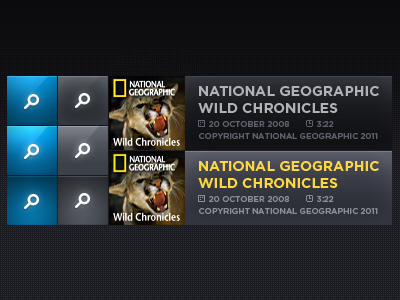
<style>
.page{position:relative;width:400px;height:300px}
.page>*{position:absolute;margin:0}
.t1{font:14px/17.2px "GothamHTF-Bold";color:#afb2b6}
.t2{font:8px "GothamHTF-Medium";color:#5e616b}
.t3{font:8px "GothamHTF-Medium";letter-spacing:-0.02em;color:#5e616b}
.t4{font:14px/17.2px "GothamHTF-Bold";color:#fcd743}
.t5{font:8px "GothamHTF-Medium";color:#8b8e95}
.t6{font:8px "GothamHTF-Medium";letter-spacing:-0.02em;color:#8b8e95}
</style>
<div class="page">
<p class="t1" style="left:198px;top:86px;width:181px;height:27px">NATIONAL GEOGRAPHIC<br>WILD CHRONICLES</p>
<p class="t2" style="left:209px;top:121px;width:80px;height:6px">20 OCTOBER 2008</p>
<p class="t3" style="left:317px;top:121px;width:17px;height:6px">3:22</p>
<p class="t2" style="left:199px;top:133px;width:179px;height:6px">COPYRIGHT NATIONAL GEOGRAPHIC 2011</p>
<p class="t4" style="left:198px;top:161px;width:181px;height:27px">NATIONAL GEOGRAPHIC<br>WILD CHRONICLES</p>
<p class="t5" style="left:209px;top:196px;width:80px;height:6px">20 OCTOBER 2008</p>
<p class="t6" style="left:317px;top:196px;width:17px;height:6px">3:22</p>
<p class="t5" style="left:199px;top:208px;width:179px;height:6px">COPYRIGHT NATIONAL GEOGRAPHIC 2011</p>
</div>
